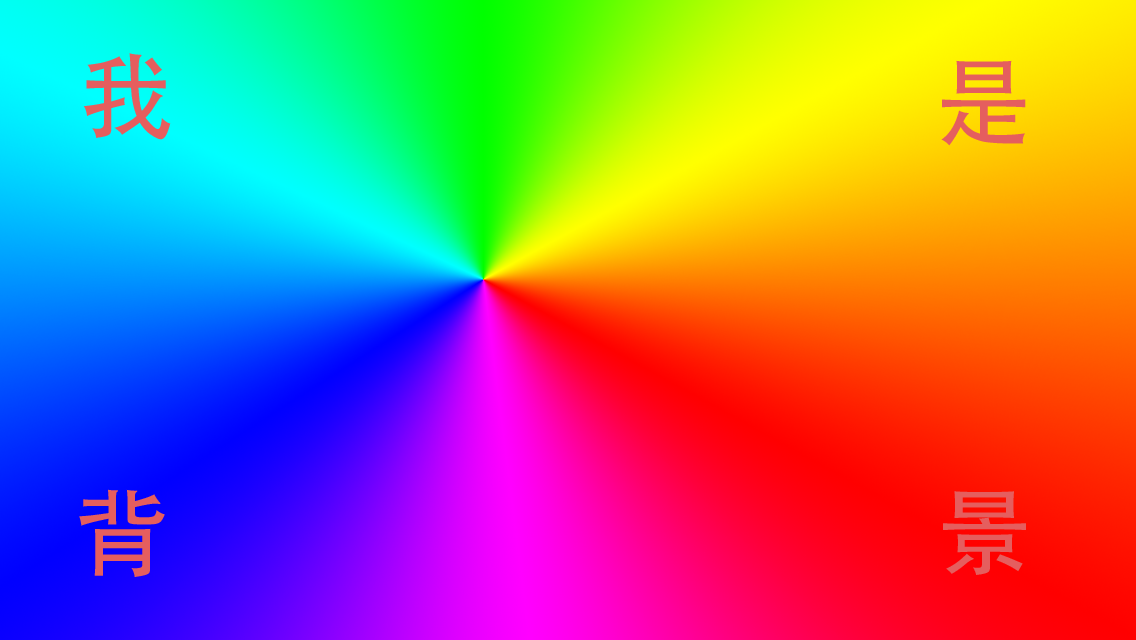
<style>
.page{position:relative;width:1136px;height:640px}
.page>*{position:absolute;margin:0}
.t1{font:96px "AdobeHeitiStd-Regular";color:#e55e5e}
</style>
<div class="page">
<p class="t1" style="left:84px;top:53px;width:87px;height:87px">我</p>
<p class="t1" style="left:941px;top:60px;width:85px;height:86px">是</p>
<p class="t1" style="left:79px;top:489px;width:86px;height:88px">背</p>
<p class="t1" style="left:943px;top:491px;width:83px;height:84px">景</p>
</div>
